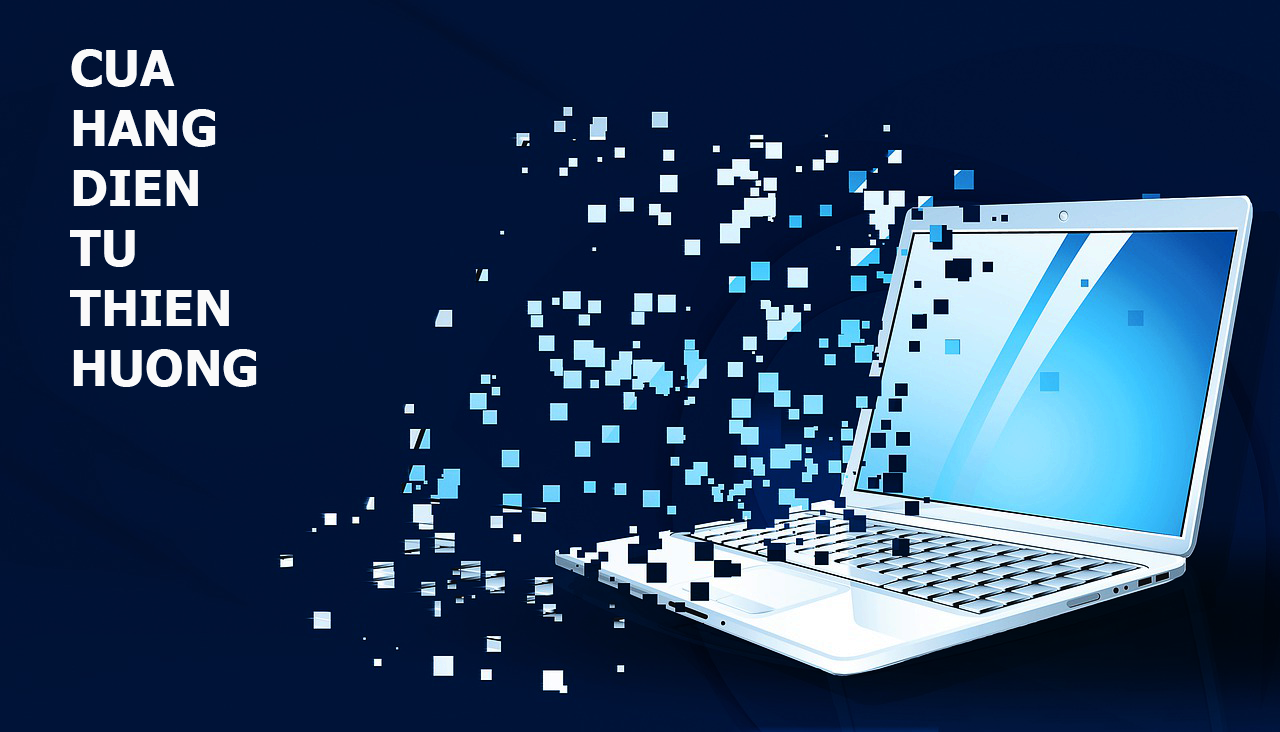
<style>
.page{position:relative;width:1280px;height:732px}
.page>*{position:absolute;margin:0}
.t1{font:12px "Tahoma-Bold";color:#fbfbfb}
</style>
<div class="page">
<p class="t1" style="left:70px;top:49px;width:187px;height:338px">CUA<br>HANG<br>DIEN<br>TU<br>THIEN<br>HUONG</p>
</div>
